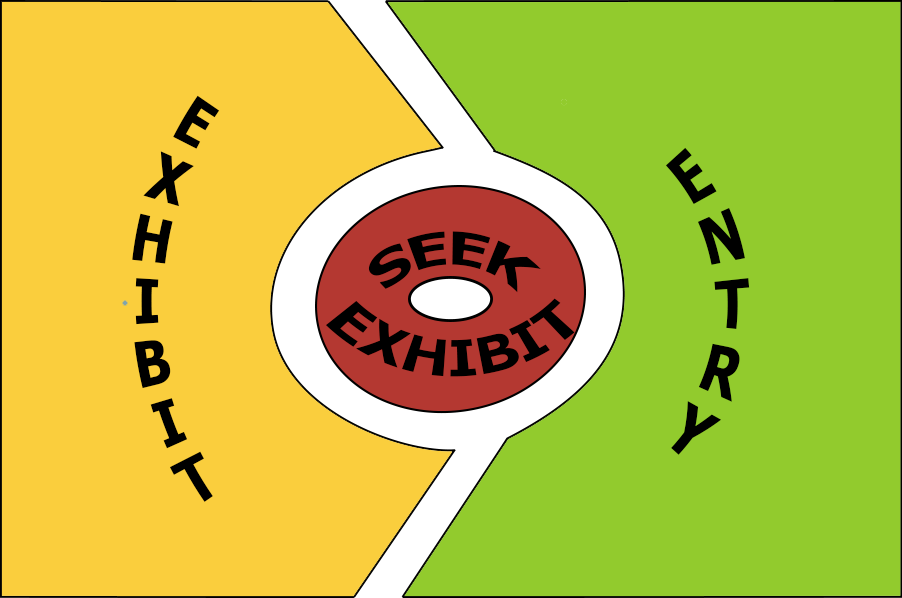
<style>
.page{position:relative;width:902px;height:598px;background:#92cb2d}
.page>*{position:absolute;margin:0}
.t1{font:54.2px "Tahoma-Bold";color:#000000}
.t2{font:45.8px "Tahoma-Bold";color:#000000}
</style>
<div class="page">
<p class="t1" style="left:132px;top:95px;width:88px;height:407px;text-align:center">EXHIBIT</p>
<p class="t1" style="left:665px;top:147px;width:85px;height:308px;text-align:center">ENTRY</p>
<p class="t2" style="left:368px;top:231px;width:173px;height:62px">SEEK</p>
<p class="t2" style="left:325px;top:298px;width:250px;height:79px;text-align:center">EXHIBIT</p>
</div>
